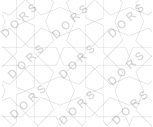
<style>
.page{position:relative;width:153px;height:127px;background:#ffffff}
.page>*{position:absolute;margin:0}
.t1{font:11px "ArialMT";letter-spacing:0.045em;color:#d9d9d9}
.t2{font:11px "ArialMT";letter-spacing:0.045em;color:#d8d8d8}
</style>
<div class="page">
<p class="t1" style="left:0px;top:4px;width:37px;height:34px;rotate:-42deg">D O R S</p>
<p class="t1" style="left:51px;top:5px;width:37px;height:34px;rotate:-42deg">D O R S</p>
<p class="t1" style="left:107px;top:4px;width:37px;height:34px;rotate:-42deg">D O R S</p>
<p class="t1" style="left:7px;top:45px;width:37px;height:34px;rotate:-42deg">D O R S</p>
<p class="t1" style="left:58px;top:45px;width:37px;height:34px;rotate:-42deg">D O R S</p>
<p class="t2" style="left:107px;top:52px;width:37px;height:34px;rotate:-42deg">D O R S</p>
<p class="t1" style="left:9px;top:85px;width:37px;height:34px;rotate:-42deg">D O R S</p>
<p class="t1" style="left:58px;top:91px;width:37px;height:34px;rotate:-42deg">D O R S</p>
<p class="t2" style="left:111px;top:91px;width:37px;height:34px;rotate:-42deg">D O R S</p>
</div>
